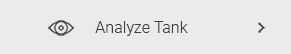
<style>
.page{position:relative;width:291px;height:54px;background:#ebebeb}
.page>*{position:absolute;margin:0}
.t1{font:16px "Roboto-Light";color:#3c3b3f}
</style>
<div class="page">
<p class="t1" style="left:95px;top:21px;width:93px;height:15px">Analyze Tank</p>
</div>
